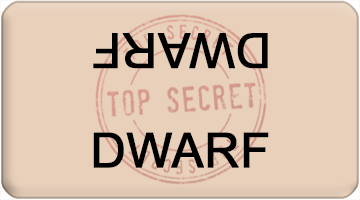
<style>
.page{position:relative;width:360px;height:200px;background:#e8d0bb}
.page>*{position:absolute;margin:0}
.t1{font:48px "ArialMT";color:#000000;font-weight:bold}
</style>
<div class="page">
<p class="t1" style="left:93px;top:33px;width:175px;height:36px;rotate:180deg">DWARF</p>
<p class="t1" style="left:93px;top:132px;width:176px;height:36px">DWARF</p>
</div>
